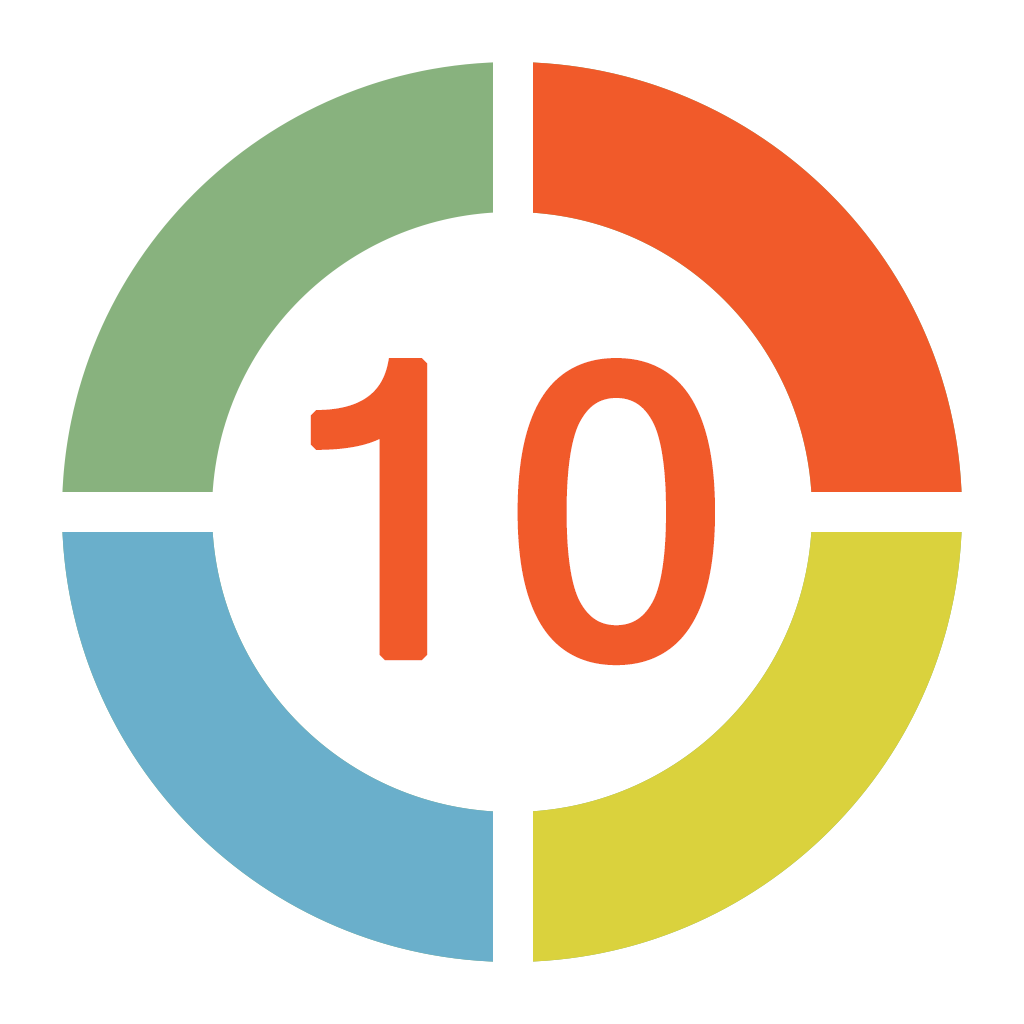
<style>
.page{position:relative;width:1024px;height:1024px;background:#ffffff}
.page>*{position:absolute;margin:0}
.t1{font:400px "MicrosoftSansSerif";color:#f15a2a;font-weight:bold}
</style>
<div class="page">
<p class="t1" style="left:310px;top:358px;width:405px;height:308px">10</p>
</div>
